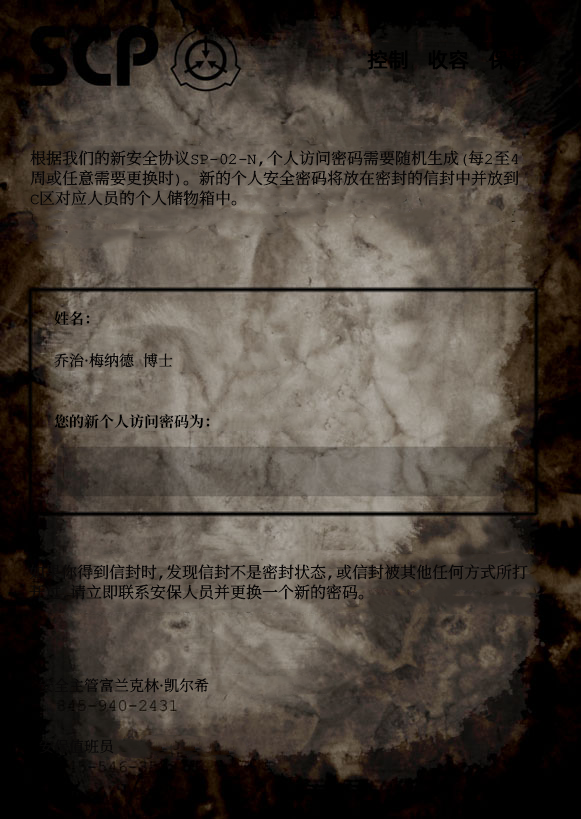
<style>
.page{position:relative;width:581px;height:819px}
.page>*{position:absolute;margin:0}
.t1{font:21px "AlibabaPuHuiTiR";color:#000000;font-weight:bold}
.t2{font:16px/20px "ContainmentBreach-Regular";color:#0a0808}
.t3{font:15px "ContainmentBreach-Bold";color:#000000}
.t4{font:15px "ContainmentBreach-Regular";color:#0a0808}
</style>
<div class="page">
<p class="t1" style="left:367px;top:49px;width:162px;height:21px">控制   收容   保护</p>
<p class="t2" style="left:30px;top:150px;width:489px;height:56px">根据我们的新安全协议SP-02-N，个人访问密码需要随机生成（每2至4<br>周或任意需要更换时）。新的个人安全密码将放在密封的信封中并放到<br>C区对应人员的个人储物箱中。</p>
<p class="t3" style="left:54px;top:311px;width:36px;height:15px">姓名：</p>
<p class="t4" style="left:54px;top:353px;width:119px;height:15px">乔治·梅纳德 博士</p>
<p class="t3" style="left:54px;top:414px;width:156px;height:15px">您的新个人访问密码为：</p>
<p class="t2" style="left:29px;top:564px;width:499px;height:37px">如果你得到信封时，发现信封不是密封状态，或信封被其他任何方式所打<br>开过，请立即联系安保人员并更换一个新的密码。</p>
<p class="t4" style="left:39px;top:678px;width:170px;height:15px">安全主管富兰克林·凯尔希</p>
<p class="t4" style="left:39px;top:739px;width:75px;height:15px">安保值班员</p>
</div>
